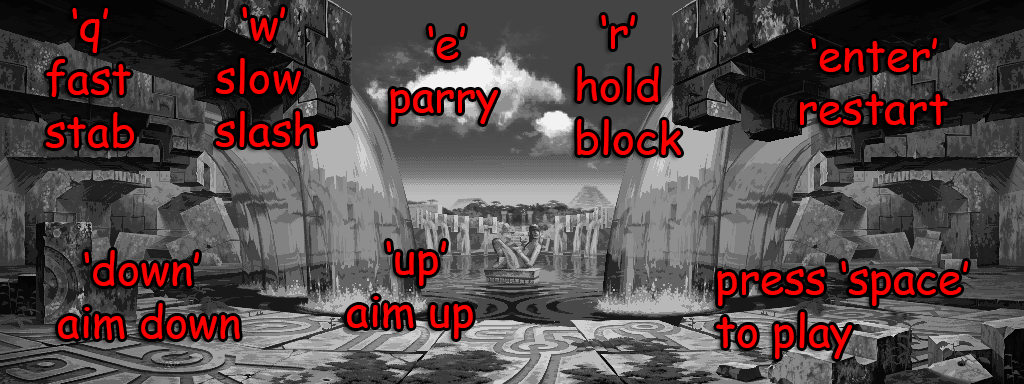
<style>
.page{position:relative;width:1024px;height:384px}
.page>*{position:absolute;margin:0}
.t1{font:44px "ComicSansMS";color:#ff0000}
</style>
<div class="page">
<p class="t1" style="left:45px;top:8px;width:89px;height:140px">‘q’<br>fast<br>stab</p>
<p class="t1" style="left:215px;top:7px;width:101px;height:140px">‘w’<br>slow<br>slash</p>
<p class="t1" style="left:577px;top:15px;width:105px;height:140px">‘r’<br>hold<br>block</p>
<p class="t1" style="left:390px;top:26px;width:108px;height:98px">‘e’<br>parry</p>
<p class="t1" style="left:800px;top:38px;width:148px;height:87px">‘enter’<br>restart</p>
<p class="t1" style="left:347px;top:241px;width:126px;height:98px">‘up’<br>aim up</p>
<p class="t1" style="left:58px;top:250px;width:182px;height:90px">‘down’<br>aim down</p>
<p class="t1" style="left:716px;top:261px;width:252px;height:98px">press ‘space’ <br>to play</p>
</div>
